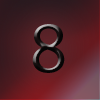
<style>
.page{position:relative;width:100px;height:100px}
.page>*{position:absolute;margin:0}
.t1{font:72px "MyriadPro-Regular";color:#191212}
</style>
<div class="page">
<p class="t1" style="left:32px;top:24px;width:33px;height:49px">8</p>
</div>
